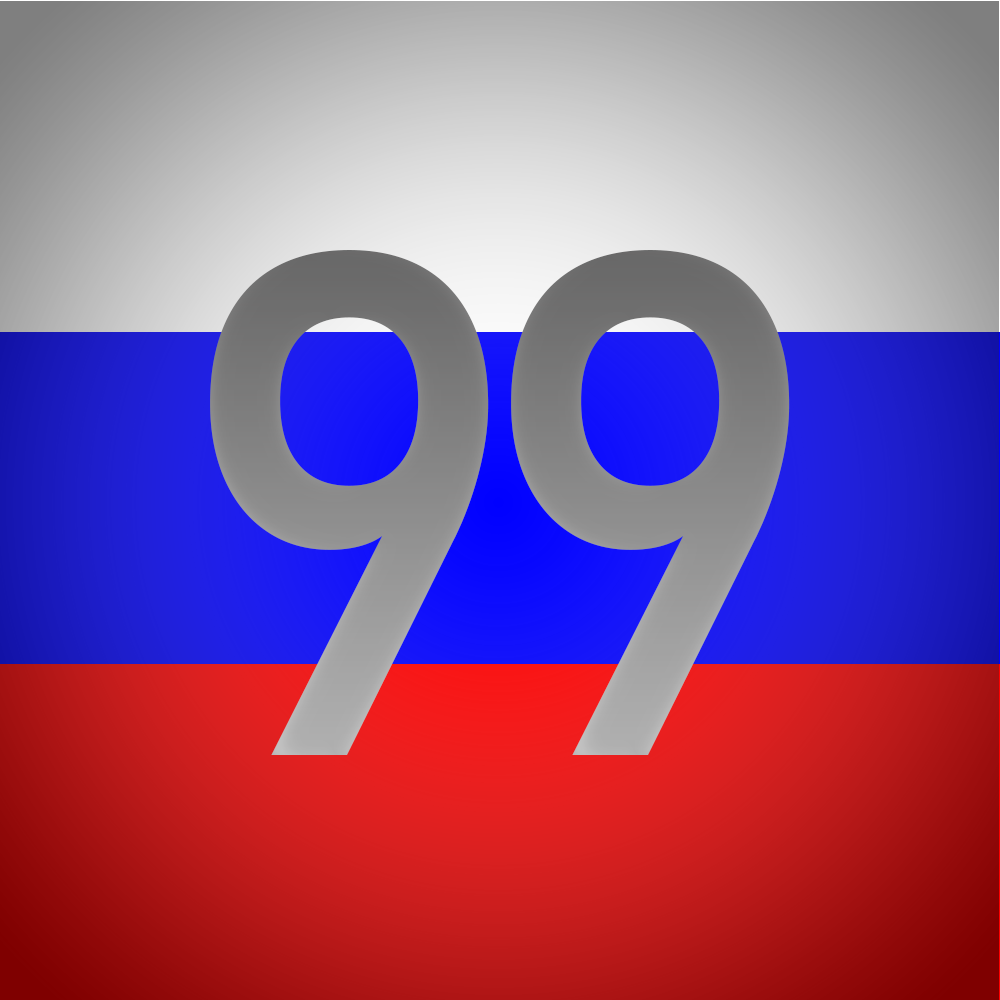
<style>
.page{position:relative;width:1000px;height:1000px}
.page>*{position:absolute;margin:0}
.t1{font:703.7px "Bahnschrift"}
</style>
<div class="page">
<p class="t1" style="left:210px;top:250px;width:580px;height:505px">99</p>
</div>
